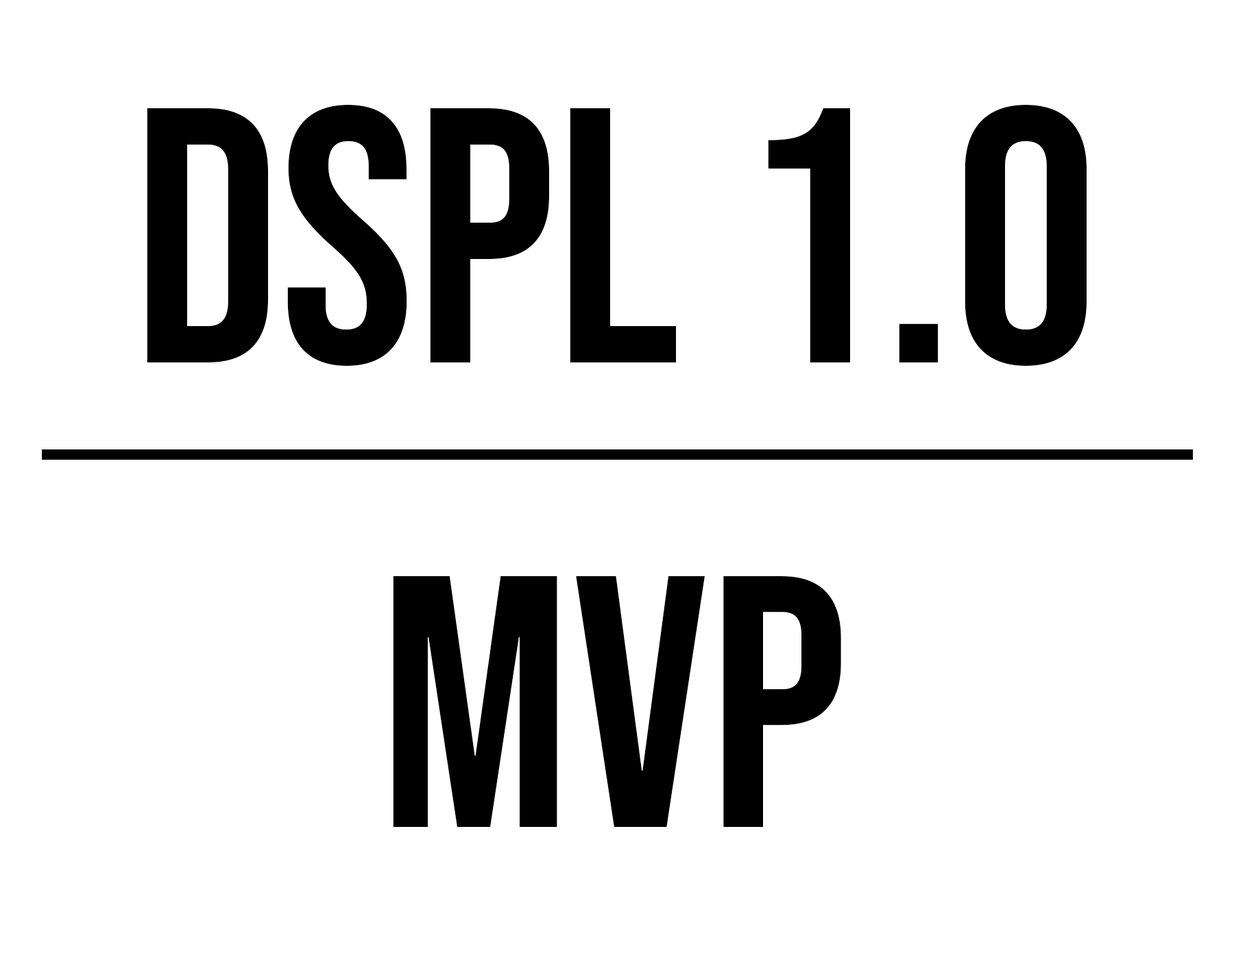
<style>
.page{position:relative;width:1234px;height:966px;background:#ffffff}
.page>*{position:absolute;margin:0}
.t1{font:363.6px "BebasNeue-Regular";color:#000000}
.t2{font:358.4px "BebasNeue-Regular";color:#000000}
</style>
<div class="page">
<p class="t1" style="left:147px;top:105px;width:939px;height:261px">DSPL 1.0</p>
<p class="t2" style="left:393px;top:576px;width:448px;height:251px">MVP</p>
</div>
